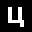
<style>
.page{position:relative;width:32px;height:32px;background:#000000}
.page>*{position:absolute;margin:0}
.t1{font:22.9px "Roboto-Black";letter-spacing:0.025em;color:#ffffff}
</style>
<div class="page">
<p class="t1" style="left:8px;top:7px;width:16px;height:20px">Ц</p>
</div>
